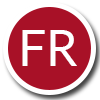
<style>
.page{position:relative;width:100px;height:100px;background:#a81127}
.page>*{position:absolute;margin:0}
.t1{font:50px "Lato-Regular";color:#ffffff}
</style>
<div class="page">
<p class="t1" style="left:22px;top:30px;width:55px;height:36px">FR</p>
</div>
